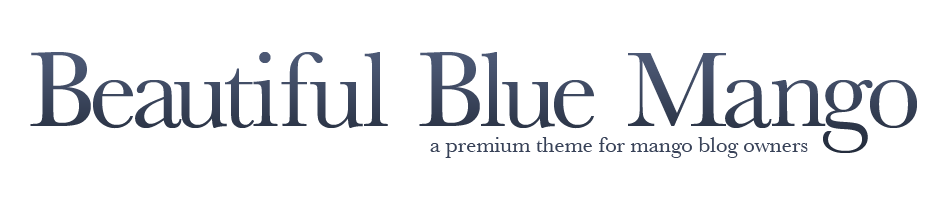
<style>
.page{position:relative;width:950px;height:214px;background:#ffffff}
.page>*{position:absolute;margin:0}
.t1{font:110px "Baskerville";color:#384258}
.t2{font:22.5px "Baskerville";color:#384258}
</style>
<div class="page">
<p class="t1" style="left:30px;top:52px;width:887px;height:101px">Beautiful Blue Mango</p>
<p class="t2" style="left:430px;top:137px;width:378px;height:21px">a premium theme for mango blog owners</p>
</div>
